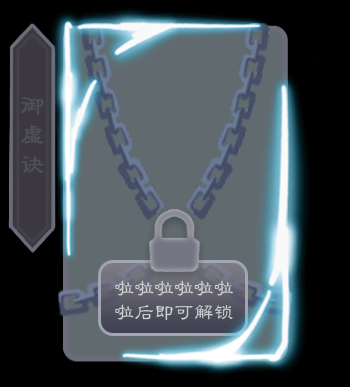
<style>
.page{position:relative;width:350px;height:387px;background:#000000}
.page>*{position:absolute;margin:0}
.t1{font:41.6px/9.6px "FZLBJW--GB1-0";letter-spacing:0.2em;color:#514f56;font-weight:bold}
.t2{font:33.3px/5.3px "FZLBJW--GB1-0";letter-spacing:0.023em;color:#d2d2d2}
</style>
<div class="page">
<p class="t1" style="left:20px;top:96px;width:24px;height:77px">御虚诀</p>
<p class="t2" style="left:115px;top:280px;width:118px;height:41px;text-align:center">啦啦啦啦啦啦<br>啦后即可解锁</p>
</div>
